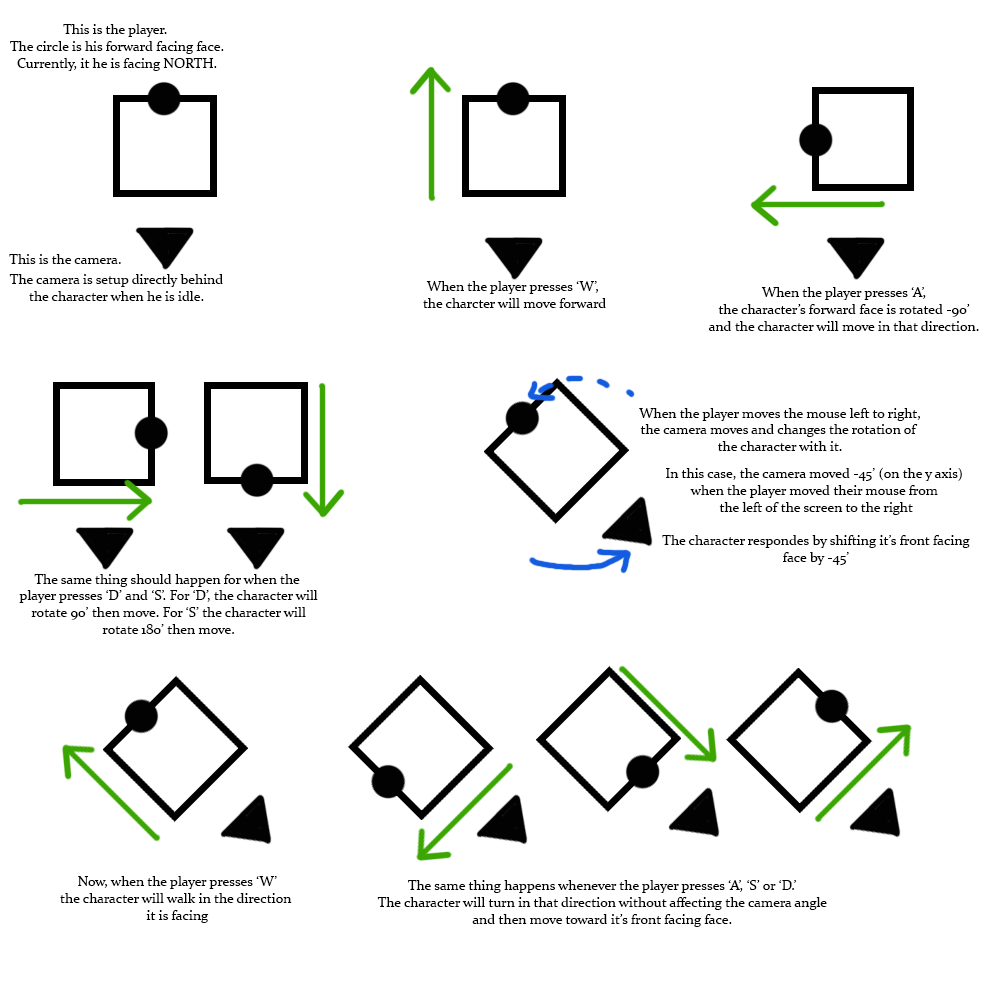
<style>
.page{position:relative;width:1000px;height:1000px;background:#ffffff}
.page>*{position:absolute;margin:0}
.t1{font:14px "Constantia";color:#000000}
.t2{font:14px "Constantia";color:#020202}
</style>
<div class="page">
<p class="t1" style="left:10px;top:24px;width:214px;height:47px;text-align:center">This is the player. <br>The circle is his forward facing face.<br>Currently, it he is facing NORTH.</p>
<p class="t2" style="left:9px;top:254px;width:112px;height:10px">This is the camera.</p>
<p class="t2" style="left:9px;top:274px;width:214px;height:27px;text-align:center">The camera is setup directly behind<br>the character when he is idle.</p>
<p class="t1" style="left:423px;top:281px;width:183px;height:27px;text-align:center">When the player presses ‘W’, <br>the charcter will move forward</p>
<p class="t1" style="left:708px;top:287px;width:271px;height:44px;text-align:center">When the player presses ‘A’,<br>the character’s forward face is rotated -90’<br>and the character will move in that direction.</p>
<p class="t1" style="left:639px;top:408px;width:281px;height:43px;text-align:center">When the player moves the mouse left to right,<br>the camera moves and changes the rotation of <br>the character with it.</p>
<p class="t1" style="left:662px;top:467px;width:308px;height:98px;text-align:center">In this case, the camera moved -45’ (on the y axis) <br>when the player moved their mouse from <br>the left of the screen to the right<br><br>The character respondes by shifting it’s front facing<br>face by -45’</p>
<p class="t1" style="left:19px;top:574px;width:299px;height:60px;text-align:center">The same thing should happen for when the <br>player presses ‘D’ and ‘S’. For ‘D’, the character will<br>rotate 90’ then move. For ‘S’ the character will<br>rotate 180’ then move.</p>
<p class="t1" style="left:60px;top:876px;width:232px;height:47px;text-align:center">Now, when the player presses ‘W’<br>the character will walk in the direction <br>it is facing</p>
<p class="t1" style="left:377px;top:880px;width:450px;height:47px;text-align:center">The same thing happens whenever the player presses ‘A’, ‘S’ or ‘D.’<br>The character will turn in that direction without affecting the camera angle<br>and then move toward it’s front facing face.</p>
</div>
